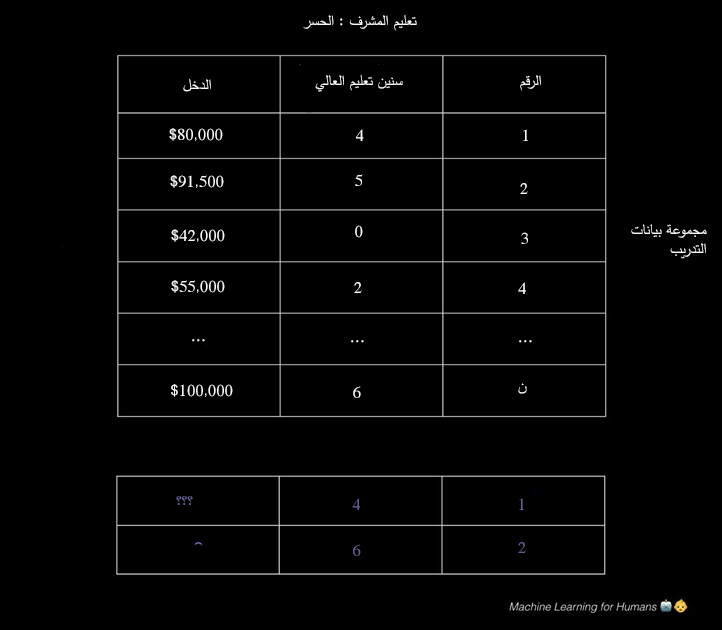
<style>
.page{position:relative;width:722px;height:630px;background:#000000}
.page>*{position:absolute;margin:0}
.t1{font:12px "SimplifiedArabic";color:#fafafa}
.t2{font:12px "SimplifiedArabic";color:#635f8f}
</style>
<div class="page">
<p class="t1" style="left:303px;top:14px;width:114px;height:17px">تعليم المشرف : الحسر</p>
<p class="t1" style="left:183px;top:78px;width:28px;height:14px">الدخل</p>
<p class="t1" style="left:315px;top:74px;width:88px;height:18px">سنين تعليم العالي</p>
<p class="t1" style="left:520px;top:75px;width:21px;height:16px">الرقم</p>
<p class="t1" style="left:169px;top:128px;width:54px;height:13px">$80,000</p>
<p class="t1" style="left:356px;top:129px;width:8px;height:12px">4</p>
<p class="t1" style="left:523px;top:129px;width:5px;height:12px">1</p>
<p class="t1" style="left:355px;top:174px;width:8px;height:12px">5</p>
<p class="t1" style="left:170px;top:175px;width:54px;height:13px">$91,500</p>
<p class="t1" style="left:520px;top:183px;width:8px;height:11px">2</p>
<p class="t1" style="left:171px;top:229px;width:54px;height:13px">$42,000</p>
<p class="t1" style="left:355px;top:225px;width:8px;height:13px">0</p>
<p class="t1" style="left:521px;top:232px;width:7px;height:12px">3</p>
<p class="t1" style="left:631px;top:224px;width:76px;height:35px;text-align:right">مجموعة بيانات<br>التدريب</p>
<p class="t1" style="left:171px;top:280px;width:54px;height:13px">$55,000</p>
<p class="t1" style="left:354px;top:282px;width:8px;height:11px">2</p>
<p class="t1" style="left:518px;top:282px;width:8px;height:12px">4</p>
<p class="t1" style="left:192px;top:339px;width:13px;height:3px">...</p>
<p class="t1" style="left:351px;top:340px;width:13px;height:3px">...</p>
<p class="t1" style="left:519px;top:340px;width:13px;height:3px">...</p>
<p class="t1" style="left:171px;top:384px;width:62px;height:13px">$100,000</p>
<p class="t1" style="left:353px;top:386px;width:8px;height:12px">6</p>
<p class="t1" style="left:518px;top:383px;width:9px;height:11px">ن</p>
<p class="t2" style="left:176px;top:496px;width:17px;height:9px">؟؟؟</p>
<p class="t2" style="left:352px;top:498px;width:8px;height:12px">4</p>
<p class="t2" style="left:519px;top:498px;width:5px;height:12px">1</p>
<p class="t2" style="left:353px;top:544px;width:8px;height:12px">6</p>
<p class="t2" style="left:518px;top:542px;width:8px;height:11px">2</p>
</div>
